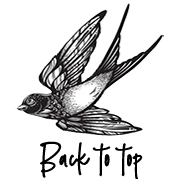
<style>
.page{position:relative;width:179px;height:179px;background:#ffffff}
.page>*{position:absolute;margin:0}
.t1{font:27.8px "SmoothStone-Regular";letter-spacing:0.033em;color:#000000;font-weight:bold}
</style>
<div class="page">
<p class="t1" style="left:40px;top:141px;width:103px;height:39px">Back to top</p>
</div>
